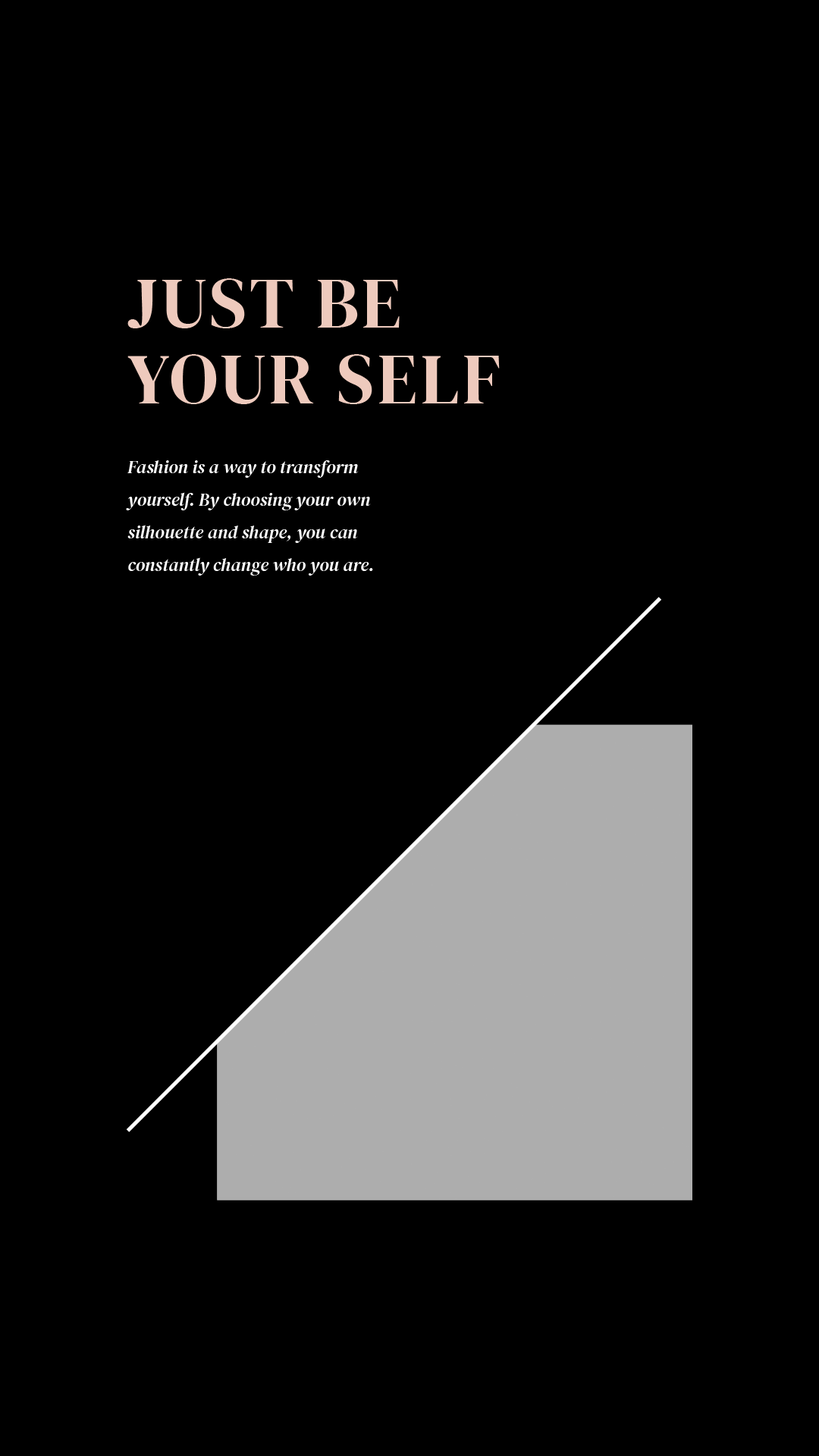
<style>
.page{position:relative;width:819px;height:1456px;background:#000000}
.page>*{position:absolute;margin:0}
.t1{font:71.3px/75.8px "DMSerifDisplay-Regular";letter-spacing:0.053em;color:#eecabd;text-transform:uppercase}
.t2{font:18.2px/32.6px "DMSerifDisplay-Italic";color:#ffffff}
</style>
<div class="page">
<p class="t1" style="left:127px;top:278px;width:373px;height:126px">Just Be<br>Your Self</p>
<p class="t2" style="left:126px;top:460px;width:247px;height:116px">Fashion is a way to transform yourself. By choosing your own silhouette and shape, you can constantly change who you are.</p>
</div>
